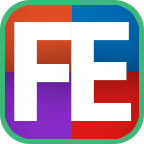
<style>
.page{position:relative;width:144px;height:144px;background:#ffffff}
.page>*{position:absolute;margin:0}
.t1{font:142.1px "SegoeUI-Bold";color:#ffffff}
</style>
<div class="page">
<p class="t1" style="left:14px;top:22px;width:58px;height:99px">F</p>
<p class="t1" style="left:71px;top:22px;width:60px;height:99px">E</p>
</div>
